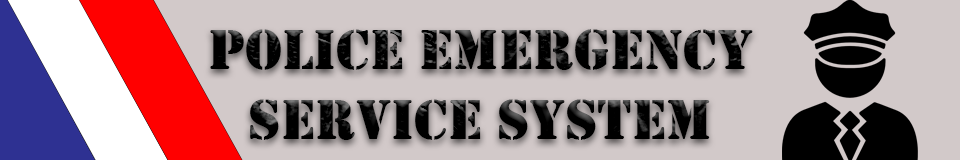
<style>
.page{position:relative;width:960px;height:160px;background:#d2c9c9}
.page>*{position:absolute;margin:0}
.t1{font:58.3px "Stencil";color:#000000}
</style>
<div class="page">
<p class="t1" style="left:210px;top:29px;width:543px;height:111px;text-align:center">POLICE EMERGENCY <br>SERVICE SYSTEM</p>
</div>
